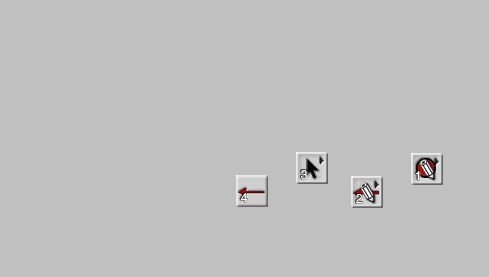
<style>
.page{position:relative;width:489px;height:277px;background:#c0c0c0}
.page>*{position:absolute;margin:0}
.t1{font:12px "Helvetica";color:#fffefe;font-variant:small-caps}
</style>
<div class="page">
<p class="t1" style="left:301px;top:170px;width:6px;height:9px">3</p>
<p class="t1" style="left:415px;top:171px;width:5px;height:9px">1</p>
<p class="t1" style="left:240px;top:193px;width:8px;height:9px">4</p>
<p class="t1" style="left:356px;top:194px;width:6px;height:9px">2</p>
</div>
